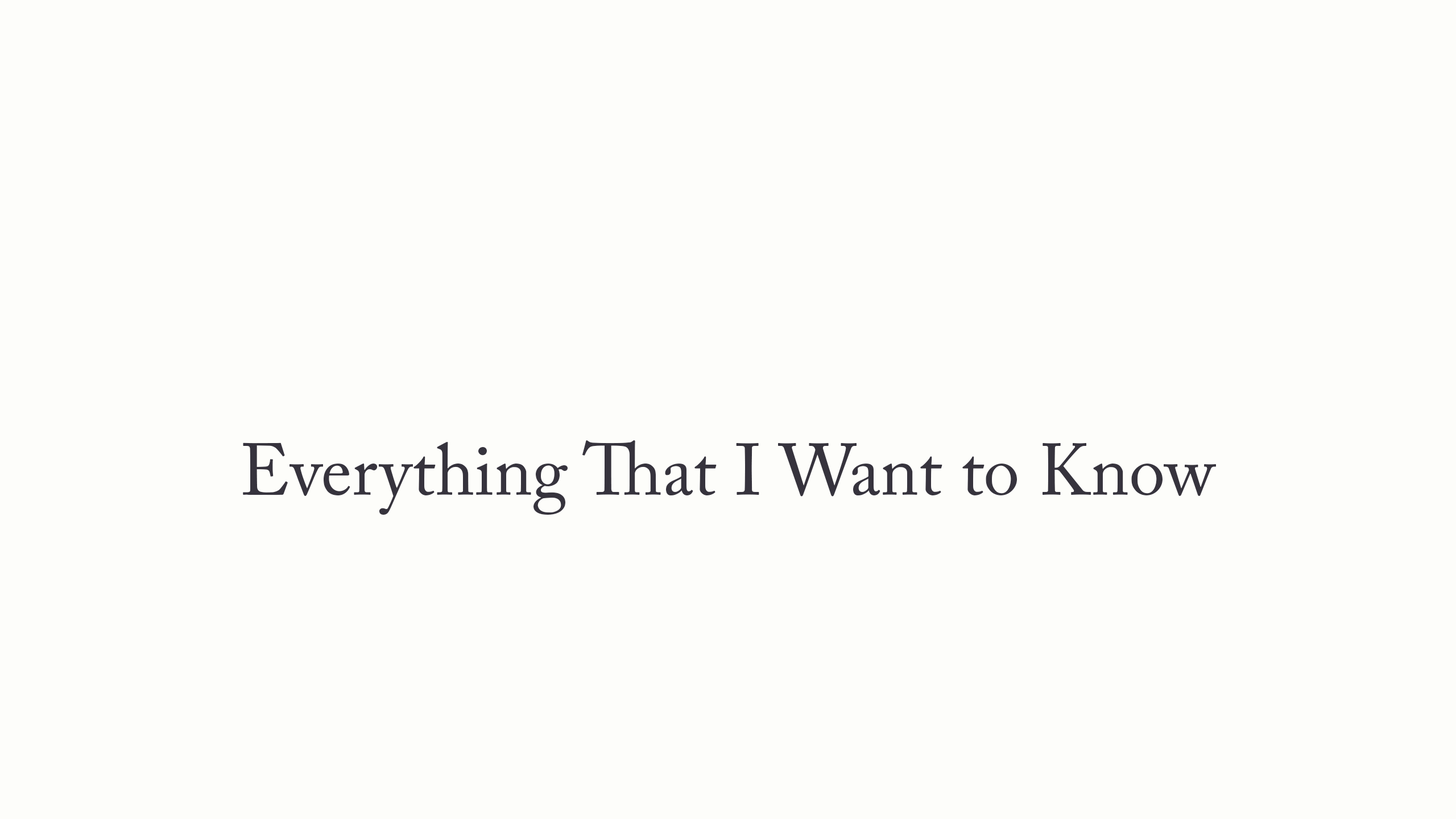
<style>
.page{position:relative;width:1456px;height:819px;background:#fdfdfa}
.page>*{position:absolute;margin:0}
.t1{font:72.8px "ACaslonPro-Regular";color:#36333d}
</style>
<div class="page">
<p class="t1" style="left:243px;top:440px;width:973px;height:75px">Everything That I Want to Know</p>
</div>
